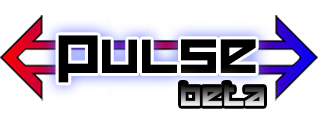
<style>
.page{position:relative;width:320px;height:125px;background:#ffffff}
.page>*{position:absolute;margin:0}
.t1{font:41.9px "HappyKiller";color:#000000;scale:1.04 1}
.t2{font:23px "HappyKiller";scale:1.04 1}
</style>
<div class="page">
<p class="t1" style="left:58px;top:35px;width:198px;height:48px">Pulse</p>
<p class="t2" style="left:181px;top:83px;width:83px;height:23px">beta</p>
</div>
